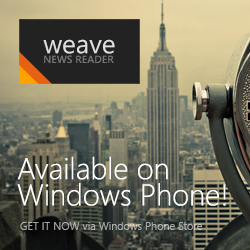
<style>
.page{position:relative;width:250px;height:250px}
.page>*{position:absolute;margin:0}
.t1{font:30px/26.3px "SegoeUI-Light";color:#ffffff}
.t2{font:11px "SegoeUI-Semilight";color:#acadac}
</style>
<div class="page">
<p class="t1" style="left:17px;top:156px;width:209px;height:50px">Available on<br>Windows Phone!</p>
<p class="t2" style="left:20px;top:222px;width:183px;height:8px">GET IT NOW via Windows Phone Store</p>
</div>
